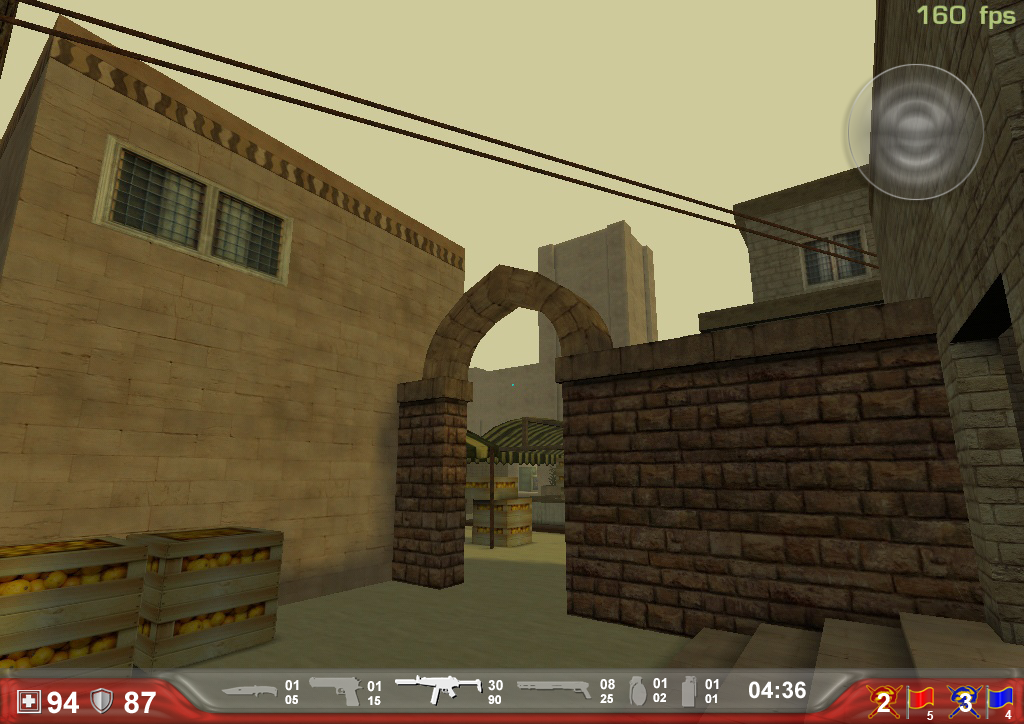
<style>
.page{position:relative;width:1024px;height:724px}
.page>*{position:absolute;margin:0}
.t1{font:14px "Arial-BoldMT";color:#ffffff}
.t2{font:12px "Arial-BoldMT";color:#ffffff}
.t3{font:23px "Arial-BoldMT";color:#ffffff}
.t4{font:30px "Arial-BoldMT";color:#ffffff}
</style>
<div class="page">
<p class="t1" style="left:653px;top:678px;width:14px;height:24px">01<br><span class="t2">02</span></p>
<p class="t1" style="left:285px;top:680px;width:14px;height:24px">01<br><span class="t2">05</span></p>
<p class="t1" style="left:367px;top:681px;width:14px;height:24px">01<br><span class="t2">15</span></p>
<p class="t1" style="left:488px;top:680px;width:15px;height:24px">30<br><span class="t2">90</span></p>
<p class="t1" style="left:600px;top:679px;width:15px;height:24px">08<br><span class="t2">25</span></p>
<p class="t1" style="left:705px;top:679px;width:14px;height:24px">01<br><span class="t2">01</span></p>
<p class="t3" style="left:749px;top:681px;width:57px;height:18px">04:36</p>
<p class="t4" style="left:47px;top:691px;width:32px;height:23px">94</p>
<p class="t4" style="left:124px;top:691px;width:32px;height:23px">87</p>
</div>
